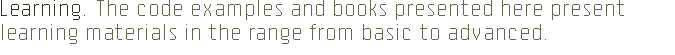
<style>
.page{position:relative;width:675px;height:55px;background:#ffffff}
.page>*{position:absolute;margin:0}
.t1{font:20px "Pro55ing-Alternate";color:#333323}
.t2{font:20px "Pro55ing-Alternate";color:#66664c}
</style>
<div class="page">
<p class="t1" style="left:1px;top:0px;width:84px;height:20px">Learning.</p>
<p class="t2" style="left:2px;top:0px;width:622px;height:44px">The code examples and books presented here present<br>learning materials in the range from basic to advanced.</p>
</div>
